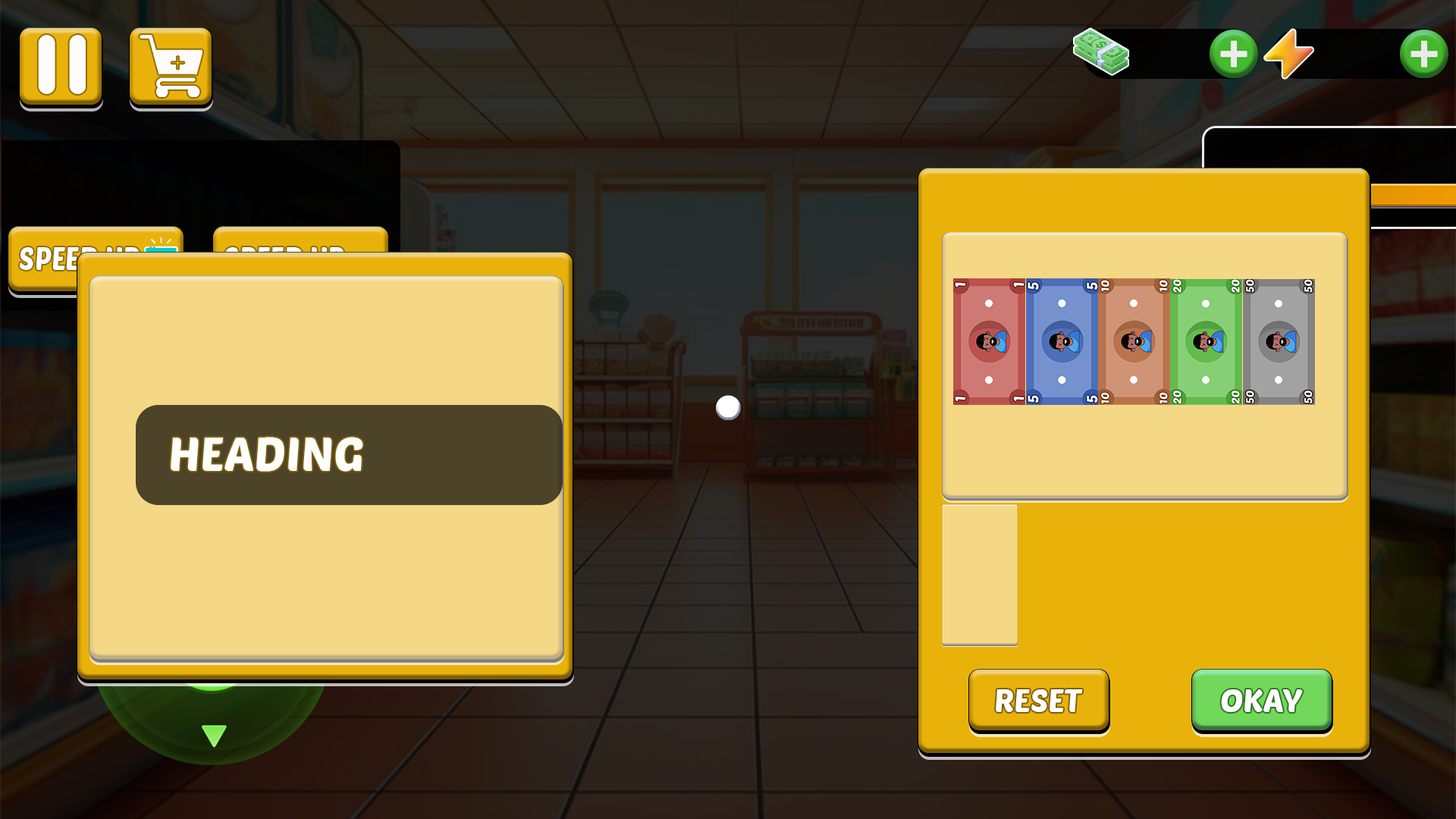
<style>
.page{position:relative;width:1456px;height:819px}
.page>*{position:absolute;margin:0}
.t1{font:47.9px "PoetsenOne-Regular";color:#ffffff}
.t2{font:32.5px "PoetsenOne-Regular";color:#ffffff}
</style>
<div class="page">
<p class="t1" style="left:171px;top:437px;width:192px;height:35px">HEADING</p>
<p class="t2" style="left:996px;top:689px;width:87px;height:23px">RESET</p>
<p class="t2" style="left:1221px;top:689px;width:82px;height:23px">OKAY</p>
</div>
